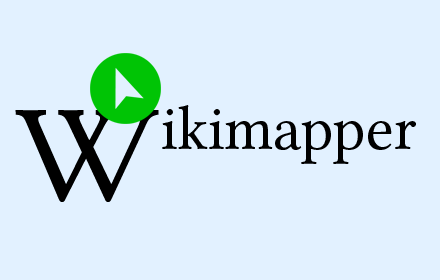
<style>
.page{position:relative;width:440px;height:280px;background:#e2f1ff}
.page>*{position:absolute;margin:0}
.t1{font:62px "LinLibertineO";color:#000000}
</style>
<div class="page">
<p class="t1" style="left:162px;top:105px;width:254px;height:59px">ikimapper</p>
</div>
